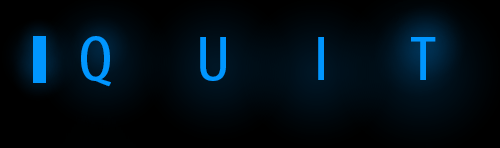
<style>
.page{position:relative;width:500px;height:148px}
.page>*{position:absolute;margin:0}
.t1{font:64px "MyriadPro-Cond";color:#0096ff;scale:1.18 1}
</style>
<div class="page">
<p class="t1" style="left:81px;top:36px;width:355px;height:51px">Q       U       I       T</p>
</div>
